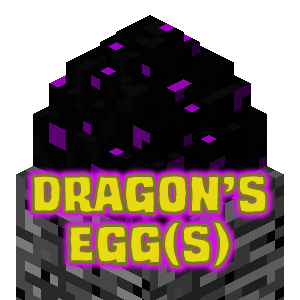
<style>
.page{position:relative;width:300px;height:300px;background:#ffffff}
.page>*{position:absolute;margin:0}
.t1{font:58.3px/50px "000TrashCinemaBB-Regular";color:#e7da10}
</style>
<div class="page">
<p class="t1" style="left:32px;top:175px;width:235px;height:92px;text-align:center">Dragon’s<br>egg(s)</p>
</div>
